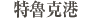
<style>
.page{position:relative;width:91px;height:19px;background:#ffffff}
.page>*{position:absolute;margin:0}
.t1{font:18px "RyuminPro-ExBold";color:#4c4843;scale:0.9 1}
</style>
<div class="page">
<p class="t1" style="left:14px;top:0px;width:64px;height:18px">特魯克港</p>
</div>
